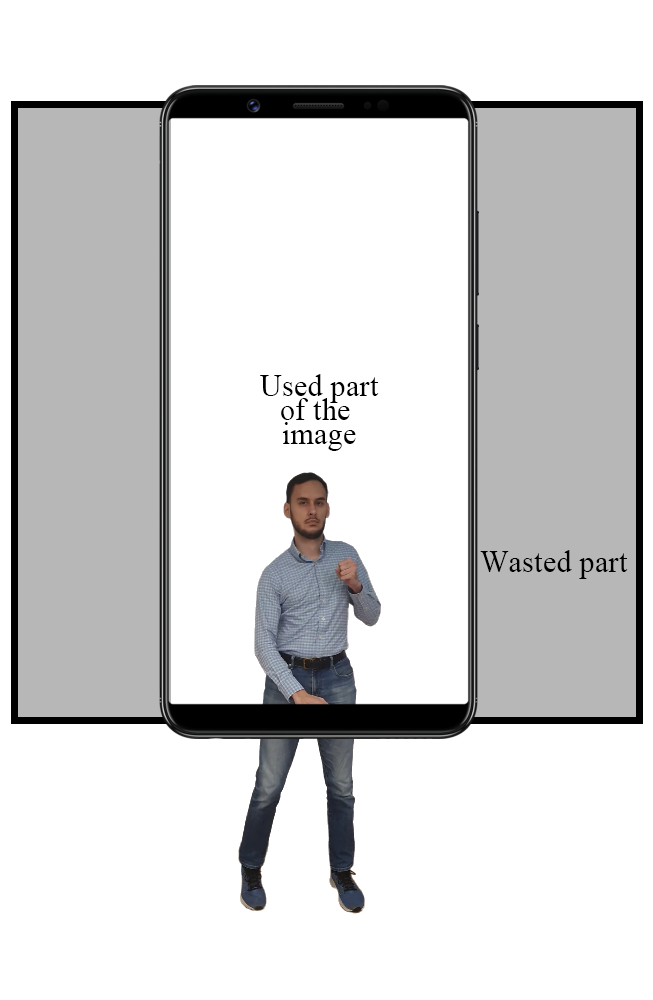
<style>
.page{position:relative;width:653px;height:1000px;background:#ffffff}
.page>*{position:absolute;margin:0}
.t1{font:32.1px/24px "TimesNewRomanPSMT";letter-spacing:0.01em;color:#000000;scale:0.93 1}
.t2{font:32.1px "TimesNewRomanPSMT";letter-spacing:0.01em;color:#000000;scale:0.93 1}
</style>
<div class="page">
<p class="t1" style="left:260px;top:374px;width:119px;height:77px;text-align:center">Used part<br>of the <br>image</p>
<p class="t2" style="left:480px;top:550px;width:148px;height:29px">Wasted part</p>
</div>
